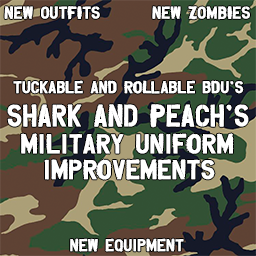
<style>
.page{position:relative;width:256px;height:256px}
.page>*{position:absolute;margin:0}
.t1{font:13.3px "Overspray";color:#ffffff;font-weight:bold}
.t2{font:24px "Overspray";color:#ffffff;font-weight:bold;scale:0.92 1}
.t3{font:21.3px "Overspray";color:#ffffff;font-weight:bold}
</style>
<div class="page">
<p class="t1" style="left:4px;top:6px;width:96px;height:14px">NEW OUTFITS</p>
<p class="t1" style="left:152px;top:6px;width:98px;height:14px">NEW ZOMBIES</p>
<p class="t1" style="left:13px;top:80px;width:231px;height:14px">tuckable and rollable bdu’s</p>
<p class="t2" style="left:7px;top:104px;width:242px;height:24px">SHARK AND PEACH’S</p>
<p class="t3" style="left:21px;top:133px;width:213px;height:47px">military uniform<br>  improvements</p>
<p class="t1" style="left:70px;top:238px;width:114px;height:14px">new equipment</p>
</div>
